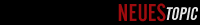
<style>
.page{position:relative;width:200px;height:25px;background:#000000}
.page>*{position:absolute;margin:0}
.t1{font:24px "AlternateGothicNo2BT-Regular";color:#9e0b0e;text-transform:uppercase}
.t2{font:18px "AlternateGothicNo2BT-Regular";color:#e5e5e5;text-transform:uppercase;font-style:italic}
</style>
<div class="page">
<p class="t1" style="left:118px;top:3px;width:48px;height:19px">Neues</p>
<p class="t2" style="left:166px;top:7px;width:32px;height:13px">Topic</p>
</div>
